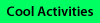
<style>
.page{position:relative;width:100px;height:23px;background:#00ff60}
.page>*{position:absolute;margin:0}
.t1{font:14px "MyriadPro-Semibold";color:#000000}
</style>
<div class="page">
<p class="t1" style="left:7px;top:6px;width:86px;height:10px">Cool Activities</p>
</div>
